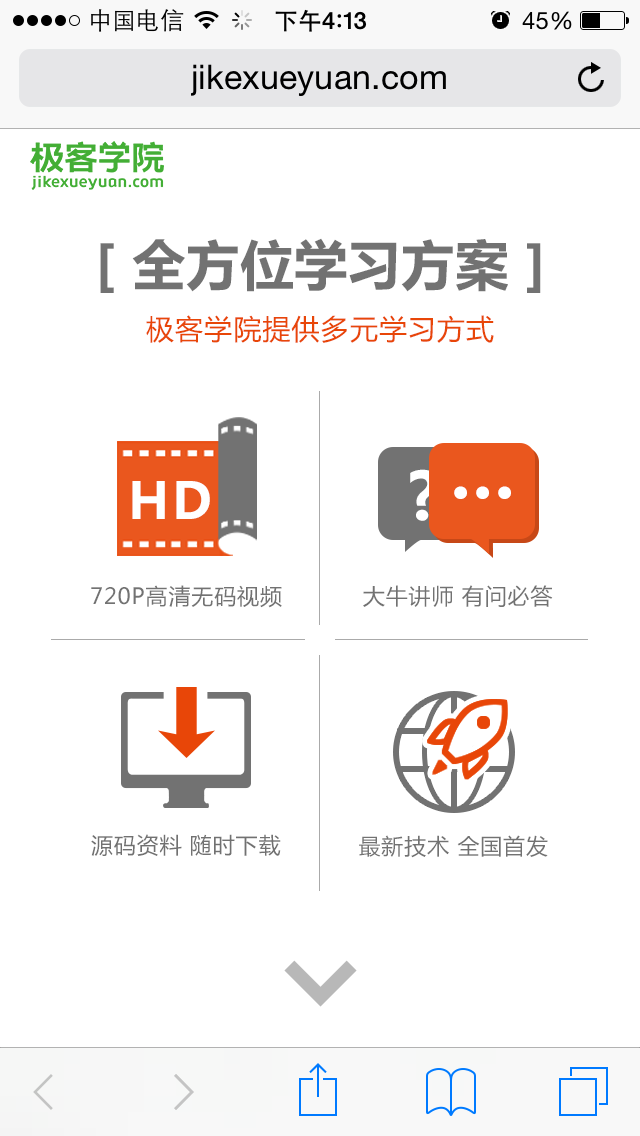
<style>
.page{position:relative;width:640px;height:1136px;background:#ffffff}
.page>*{position:absolute;margin:0}
.t1{font:53.8px "MicrosoftYaHei-Bold";color:#727272}
.t2{font:28px "MicrosoftYaHei";letter-spacing:0.04em;color:#e84608}
.t3{font:65.4px "MicrosoftYaHei-Bold";letter-spacing:0.04em;color:#ffffff}
.t4{font:50.3px "MicrosoftYaHei-Bold";letter-spacing:0.04em;color:#ffffff}
.t5{font:74.3px "MicrosoftYaHei-Bold";letter-spacing:0.04em;color:#ffffff;scale:0.91 1}
.t6{font:22px "MicrosoftYaHei";letter-spacing:0.04em;color:#727272}
.t7{font:22px "MicrosoftYaHei";letter-spacing:0.04em;color:#717171}
</style>
<div class="page">
<p class="t1" style="left:100px;top:238px;width:441px;height:55px">［全方位学习方案］</p>
<p class="t2" style="left:146px;top:315px;width:348px;height:28px">极客学院提供多元学习方式</p>
<p class="t3" style="left:410px;top:469px;width:28px;height:52px">?</p>
<p class="t4" style="left:132px;top:481px;width:78px;height:38px">HD</p>
<p class="t5" style="left:454px;top:486px;width:57px;height:13px">...</p>
<p class="t6" style="left:91px;top:585px;width:191px;height:23px">720P高清无码视频</p>
<p class="t6" style="left:363px;top:585px;width:190px;height:22px">大牛讲师 有问必答</p>
<p class="t7" style="left:91px;top:834px;width:190px;height:22px">源码资料 随时下载</p>
<p class="t6" style="left:359px;top:835px;width:189px;height:23px">最新技术 全国首发</p>
</div>
